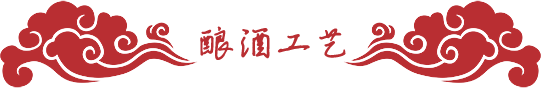
<style>
.page{position:relative;width:541px;height:88px;background:#ffffff}
.page>*{position:absolute;margin:0}
.t1{font:37.5px "ÊéÌå·»ÕÔ¾Å½­¸Ö±ÊÐÐÊé";color:#b92e32;font-weight:bold}
</style>
<div class="page">
<p class="t1" style="left:200px;top:26px;width:146px;height:34px">酿酒工艺</p>
</div>
